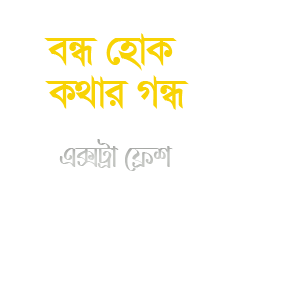
<style>
.page{position:relative;width:300px;height:300px;background:#ffffff}
.page>*{position:absolute;margin:0}
.t1{font:48px "SutonnyMJ-Bold";letter-spacing:-0.025em;color:#f8d305}
.t2{font:30px "LiRajdipSatyajitANSIV1";letter-spacing:-0.025em;color:#c0c2bf}
</style>
<div class="page">
<p class="t1" style="left:44px;top:33px;width:133px;height:38px">eÜ †nvK</p>
<p class="t1" style="left:45px;top:75px;width:144px;height:35px">K_vi MÜ</p>
<p class="t2" style="left:59px;top:139px;width:114px;height:32px">G·Uªv †d«k</p>
</div>
